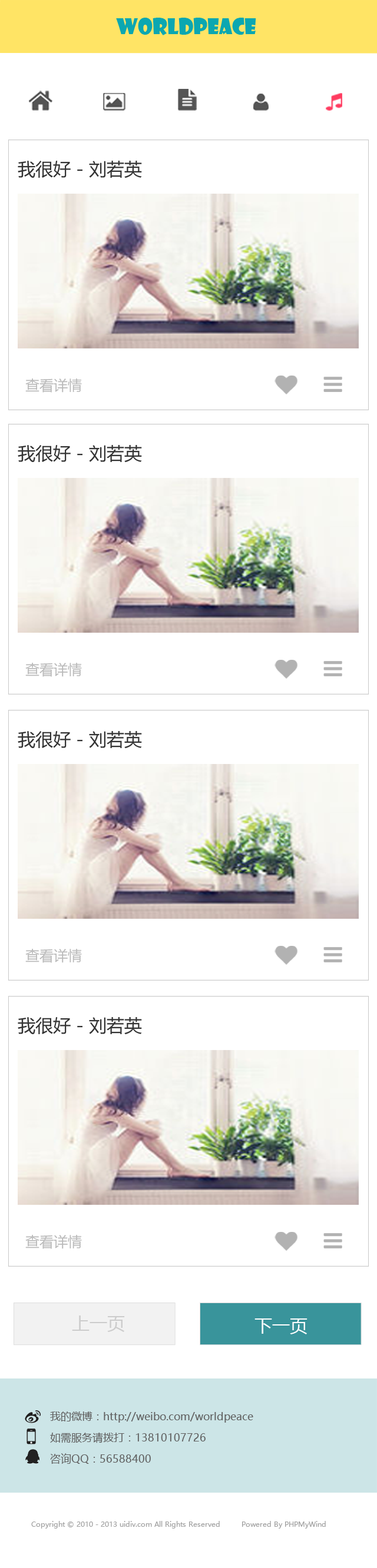
<style>
.page{position:relative;width:377px;height:1568px;background:#ffffff}
.page>*{position:absolute;margin:0}
.t1{font:21.2px "ShowcardGothic-Reg";color:#0ba7b1}
.t2{font:17.7px "MicrosoftYaHei";color:#333333}
.t3{font:14.1px "MicrosoftYaHei";color:#bbbbbb}
.t4{font:17.7px "MicrosoftYaHei";color:#cccccc}
.t5{font:17.7px "MicrosoftYaHei";color:#ffffff}
.t6{font:10.6px/21.2px "MicrosoftYaHei";color:#616161}
.t7{font:7.1px "MicrosoftYaHei";color:#a2a2a2}
</style>
<div class="page">
<p class="t1" style="left:116px;top:18px;width:140px;height:17px">worldpeace</p>
<p class="t2" style="left:18px;top:161px;width:124px;height:17px">我很好 - 刘若英</p>
<p class="t3" style="left:25px;top:378px;width:57px;height:15px">查看详情</p>
<p class="t2" style="left:18px;top:445px;width:124px;height:18px">我很好 - 刘若英</p>
<p class="t3" style="left:25px;top:663px;width:57px;height:14px">查看详情</p>
<p class="t2" style="left:18px;top:731px;width:124px;height:18px">我很好 - 刘若英</p>
<p class="t3" style="left:25px;top:949px;width:57px;height:14px">查看详情</p>
<p class="t2" style="left:18px;top:1017px;width:124px;height:18px">我很好 - 刘若英</p>
<p class="t3" style="left:25px;top:1235px;width:57px;height:14px">查看详情</p>
<p class="t4" style="left:72px;top:1315px;width:53px;height:17px">上一页</p>
<p class="t5" style="left:254px;top:1318px;width:53px;height:16px">下一页</p>
<p class="t6" style="left:50px;top:1411px;width:203px;height:53px">我的微博：http://weibo.com/worldpeace            <br>如需服务请拨打：13810107726        <br>咨询QQ：56588400</p>
<p class="t7" style="left:31px;top:1521px;width:294px;height:8px">Copyright © 2010 - 2013 uidiv.com All Rights Reserved         Powered By PHPMyWind</p>
</div>
